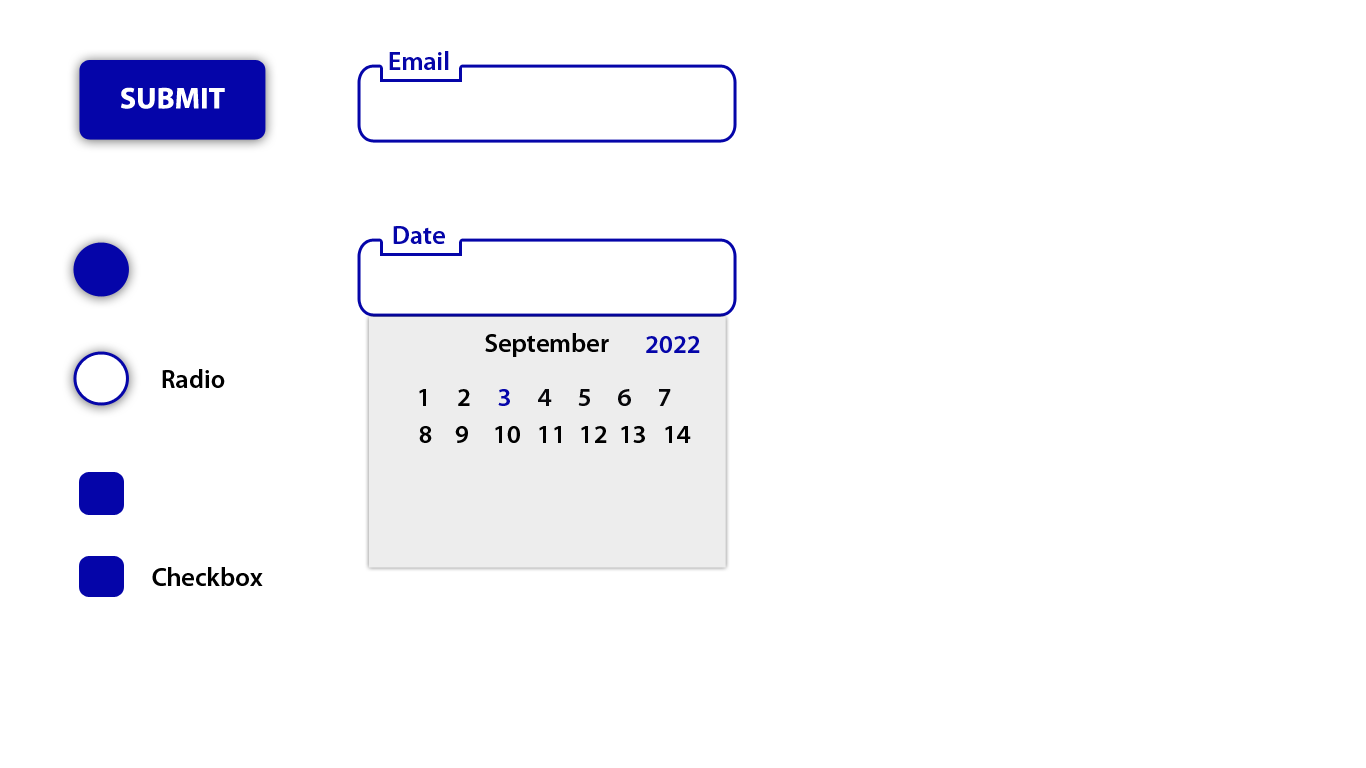
<style>
.page{position:relative;width:1366px;height:768px;background:#ffffff}
.page>*{position:absolute;margin:0}
.t1{font:26px "MyriadPro-Semibold";color:#0505a9}
.t2{font:30px "MyriadPro-Bold";color:#ffffff}
.t3{font:26px "MyriadPro-Semibold";color:#000000}
.t4{font:26px "MyriadPro-Semibold";letter-spacing:0.4em;color:#060609}
.t5{font:26px "MyriadPro-Semibold";letter-spacing:0.4em;color:#000000}
.t6{font:26px "MyriadPro-Semibold";letter-spacing:0.4em;color:#0505a9}
.t7{font:26px "MyriadPro-Semibold";letter-spacing:0.4em;color:#09090d}
.t8{font:26px "MyriadPro-Semibold";letter-spacing:0.03em;color:#000000}
.t9{font:26px "MyriadPro-Semibold";letter-spacing:0.33em;color:#000000}
</style>
<div class="page">
<p class="t1" style="left:389px;top:51px;width:60px;height:19px">Email</p>
<p class="t2" style="left:121px;top:87px;width:104px;height:22px">SUBMIT</p>
<p class="t1" style="left:393px;top:226px;width:52px;height:18px">Date</p>
<p class="t3" style="left:485px;top:333px;width:124px;height:24px">September</p>
<p class="t1" style="left:646px;top:336px;width:54px;height:17px">2022</p>
<p class="t3" style="left:162px;top:369px;width:63px;height:19px">Radio</p>
<p class="t4" style="left:419px;top:389px;width:252px;height:17px"><span class="t5">1 2</span><span class="t6"> 3 </span><span class="t7">4 </span>5 6 7</p>
<p class="t8" style="left:419px;top:426px;width:272px;height:17px"><span class="t9">8 9 </span><span class="t3">10 </span>11  12<span class="t3">  13 14</span></p>
<p class="t3" style="left:152px;top:567px;width:111px;height:19px">Checkbox</p>
</div>
